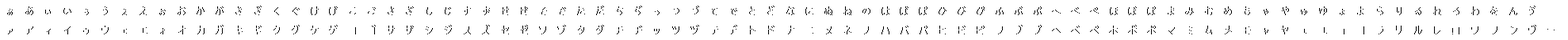
<style>
.page{position:relative;width:1568px;height:40px;background:#ffffff}
.page>*{position:absolute;margin:0}
.t1{font:9.5px/19px "PixelMplus12-Regular";color:#000000}
</style>
<div class="page">
<p class="t1" style="left:7px;top:6px;width:1548px;height:28px">ぁ  あ  ぃ  い  ぅ  う  ぇ  え  ぉ  お  か  が  き  ぎ  く  ぐ  け  げ  こ  ご  さ  ざ  し  じ  す  ず  せ  ぜ  そ  ぞ  た  だ  ち  ぢ  っ  つ  づ  て  で  と  ど  な  に  ぬ  ね  の  は  ば  ぱ  ひ  び  ぴ  ふ  ぶ  ぷ  へ  べ  ぺ  ほ  ぼ  ぽ  ま  み  む  め  も  ゃ  や  ゅ  ゆ  ょ  よ  ら  り  る  れ  ろ  わ  を  ん  ゔ<br>ァ  ア  ィ  イ  ゥ  ウ  ェ  エ  ォ  オ  カ  ガ  キ  ギ  ク  グ  ケ  ゲ  コ  ゴ  サ  ザ  シ  ジ  ス  ズ  セ  ゼ  ソ  ゾ  タ  ダ  チ  ヂ  ッ  ツ  ヅ  テ  デ  ト  ド  ナ  ニ  ヌ  ネ  ノ  ハ  バ  パ  ヒ  ビ  ピ  フ  ブ  プ  ヘ  ベ  ペ  ホ  ボ  ポ  マ  ミ  ム  メ  モ  ャ  ヤ  ュ  ユ  ョ  ヨ  ラ  リ  ル  レ  ロ  ワ  ヲ  ン  ヴ  ー</p>
</div>
